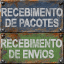
<style>
.page{position:relative;width:64px;height:64px}
.page>*{position:absolute;margin:0}
.t1{font:11.3px/10.7px "Arial-BoldMT";letter-spacing:-0.02em;color:#c7c7c7;text-transform:uppercase;scale:0.76 1}
</style>
<div class="page">
<p class="t1" style="left:1px;top:7px;width:62px;height:21px;text-align:center">Recebimento<br>de pacotes</p>
<p class="t1" style="left:1px;top:39px;width:61px;height:20px;text-align:center">Recebimento<br>de ENVIOS</p>
</div>
